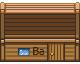
<style>
.page{position:relative;width:80px;height:64px;background:#684020}
.page>*{position:absolute;margin:0}
.t1{font:10.7px "Ubuntu";color:#3c2003}
</style>
<div class="page">
<p class="t1" style="left:33px;top:47px;width:11px;height:8px">Ba</p>
</div>
